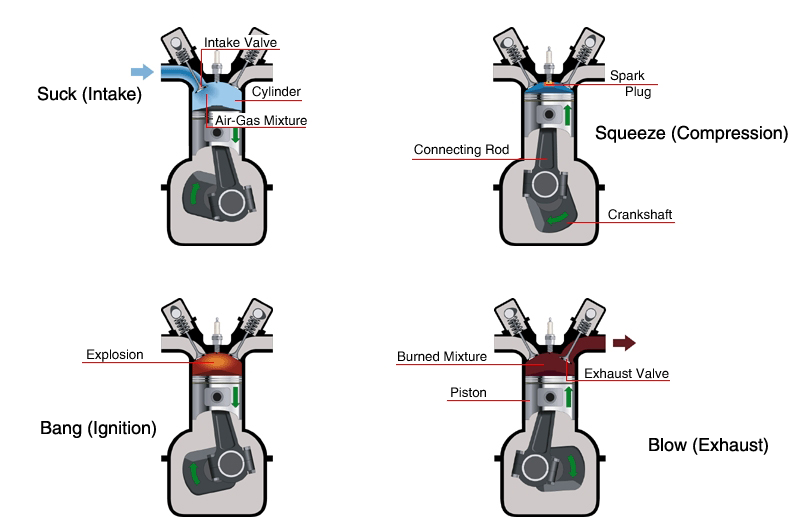
<style>
.page{position:relative;width:800px;height:527px;background:#ffffff}
.page>*{position:absolute;margin:0}
.t1{font:13.3px "HelveticaLT";color:#000000}
.t2{font:18px "HelveticaLT";color:#000000}
</style>
<div class="page">
<p class="t1" style="left:205px;top:37px;width:72px;height:11px">Intake Valve</p>
<p class="t1" style="left:610px;top:70px;width:41px;height:29px">Spark<br>    Plug</p>
<p class="t2" style="left:37px;top:86px;width:105px;height:18px">Suck (Intake)</p>
<p class="t1" style="left:252px;top:86px;width:49px;height:13px">Cylinder</p>
<p class="t1" style="left:215px;top:115px;width:92px;height:11px">Air-Gas Mixture</p>
<p class="t2" style="left:595px;top:125px;width:193px;height:18px">Squeeze (Compression)</p>
<p class="t1" style="left:414px;top:144px;width:95px;height:13px">Connecting Rod</p>
<p class="t1" style="left:608px;top:209px;width:64px;height:11px">Crankshaft</p>
<p class="t1" style="left:87px;top:349px;width:56px;height:13px">Explosion</p>
<p class="t1" style="left:398px;top:351px;width:89px;height:11px">Burned Mixture</p>
<p class="t1" style="left:585px;top:368px;width:84px;height:11px">Exhaust Valve</p>
<p class="t1" style="left:451px;top:387px;width:35px;height:11px">Piston</p>
<p class="t2" style="left:41px;top:420px;width:115px;height:18px">Bang (Ignition)</p>
<p class="t2" style="left:649px;top:437px;width:119px;height:18px">Blow (Exhaust)</p>
</div>
